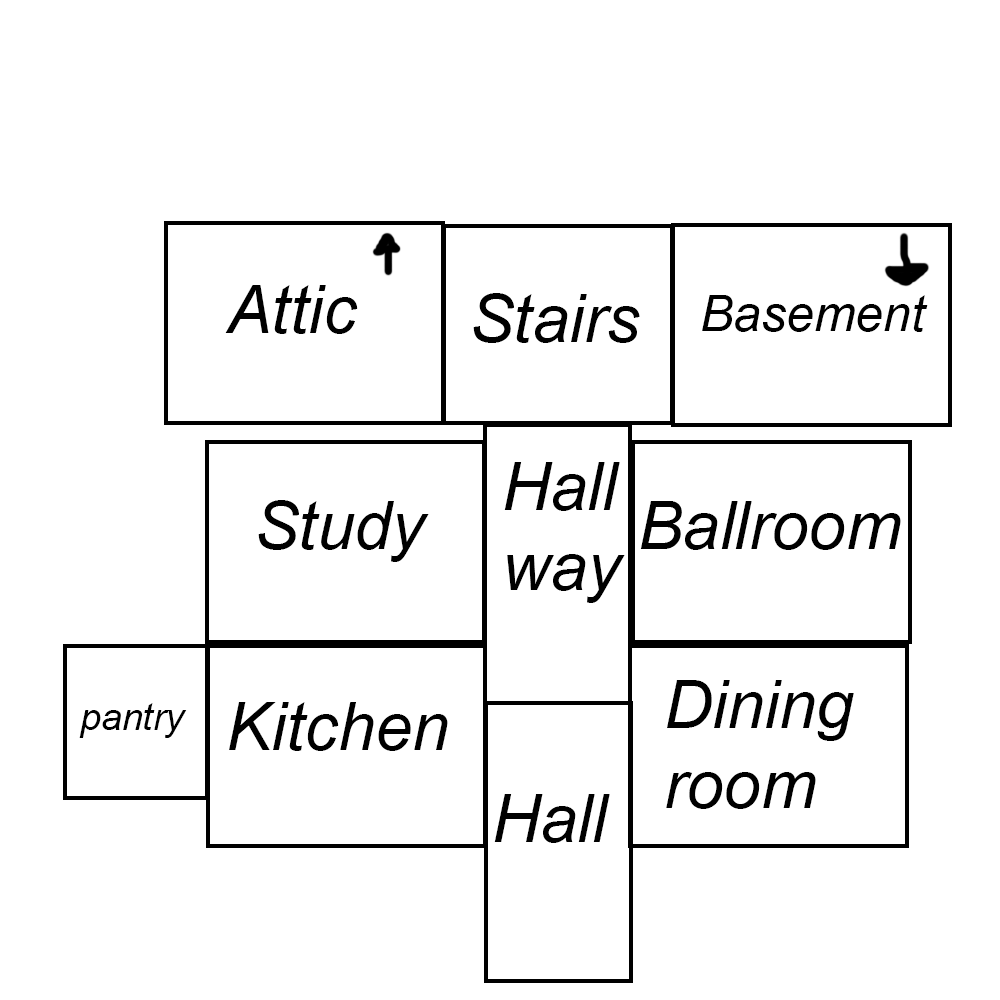
<style>
.page{position:relative;width:1000px;height:1000px;background:#ffffff}
.page>*{position:absolute;margin:0}
.t1{font:66.7px "Arial-ItalicMT";color:#000000}
.t2{font:50px "Arial-ItalicMT";color:#000000}
.t3{font:37.5px "Arial-ItalicMT";color:#000000}
</style>
<div class="page">
<p class="t1" style="left:225px;top:285px;width:133px;height:49px">Attic</p>
<p class="t1" style="left:473px;top:293px;width:167px;height:50px">Stairs</p>
<p class="t2" style="left:702px;top:295px;width:226px;height:37px">Basement</p>
<p class="t1" style="left:504px;top:462px;width:121px;height:141px">Hall<br>way</p>
<p class="t1" style="left:258px;top:500px;width:171px;height:62px">Study</p>
<p class="t1" style="left:640px;top:501px;width:261px;height:49px">Ballroom</p>
<p class="t1" style="left:666px;top:680px;width:188px;height:129px">Dining<br>room</p>
<p class="t1" style="left:229px;top:702px;width:219px;height:49px">Kitchen</p>
<p class="t3" style="left:79px;top:703px;width:108px;height:35px">pantry</p>
<p class="t1" style="left:494px;top:794px;width:116px;height:49px">Hall</p>
</div>
